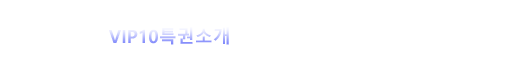
<style>
.page{position:relative;width:512px;height:64px;background:#ffffff}
.page>*{position:absolute;margin:0}
.t1{font:18px "MalgunGothicBold"}
</style>
<div class="page">
<p class="t1" style="left:109px;top:27px;width:120px;height:18px">VIP10특권소개</p>
</div>
